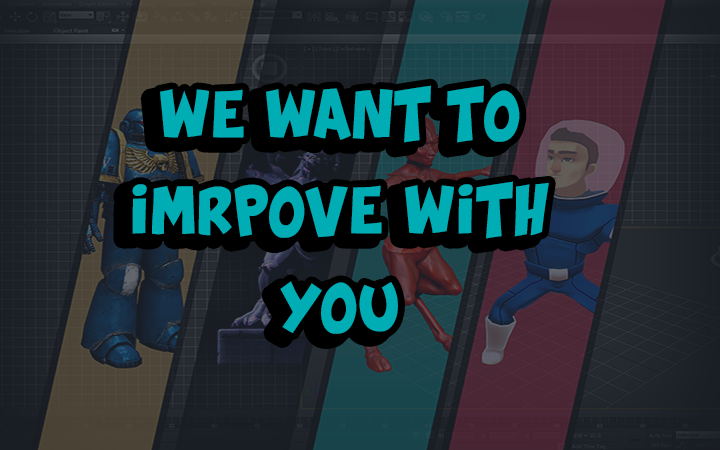
<style>
.page{position:relative;width:720px;height:450px}
.page>*{position:absolute;margin:0}
.t1{font:40px "Splatch";color:#00adb5}
.t2{font:40px "TimesNewRomanPSMT";color:#00adb5}
</style>
<div class="page">
<p class="t1" style="left:132px;top:85px;width:417px;height:249px;text-align:center"><span class="t2"><br></span>WE WANT TO <br><br>IMRPOVE WITH <br><br>YOU</p>
</div>
